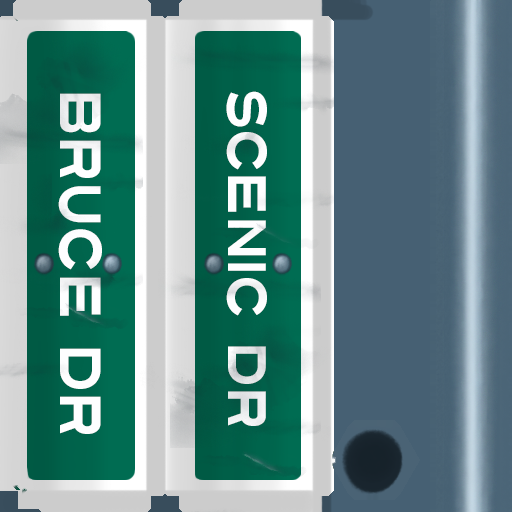
<style>
.page{position:relative;width:512px;height:512px}
.page>*{position:absolute;margin:0}
.t1{font:58px "Turnpike";color:#fefeff;scale:0.75 1}
.t2{font:54px "Turnpike";color:#fefeff;scale:0.75 1}
</style>
<div class="page">
<p class="t1" style="left:58px;top:93px;width:44px;height:341px;rotate:90deg">Bruce Dr</p>
<p class="t2" style="left:226px;top:91px;width:41px;height:335px;rotate:90deg">Scenic Dr</p>
</div>
